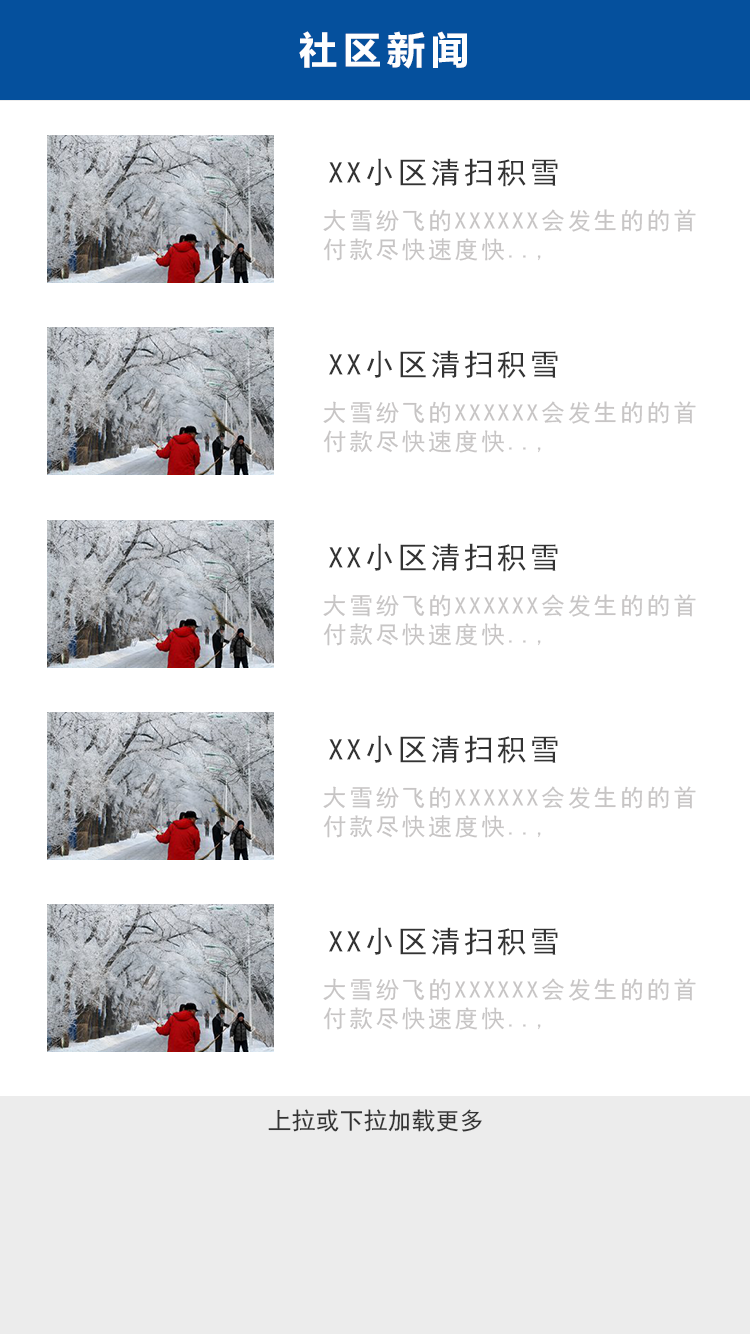
<style>
.page{position:relative;width:750px;height:1334px;background:#ffffff}
.page>*{position:absolute;margin:0}
.t1{font:40px "FZLTCHJW--GB1-0";letter-spacing:0.1em;color:#fefefe;text-transform:uppercase}
.t2{font:30px "SimHei";letter-spacing:0.1em;color:#333333;text-transform:uppercase}
.t3{font:24px/29.2px "SimHei";letter-spacing:0.1em;color:#c7c5c5;text-transform:uppercase}
.t4{font:24px "SimHei";color:#333333;text-transform:uppercase}
</style>
<div class="page">
<p class="t1" style="left:299px;top:31px;width:168px;height:38px">社区新闻</p>
<p class="t2" style="left:329px;top:158px;width:229px;height:29px">XX小区清扫积雪</p>
<p class="t3" style="left:323px;top:209px;width:373px;height:52px">大雪纷飞的XXXXXX会发生的的首<br>付款尽快速度快..,</p>
<p class="t2" style="left:329px;top:350px;width:229px;height:29px">XX小区清扫积雪</p>
<p class="t3" style="left:323px;top:401px;width:373px;height:52px">大雪纷飞的XXXXXX会发生的的首<br>付款尽快速度快..,</p>
<p class="t2" style="left:329px;top:543px;width:229px;height:29px">XX小区清扫积雪</p>
<p class="t3" style="left:323px;top:594px;width:373px;height:52px">大雪纷飞的XXXXXX会发生的的首<br>付款尽快速度快..,</p>
<p class="t2" style="left:329px;top:735px;width:229px;height:29px">XX小区清扫积雪</p>
<p class="t3" style="left:323px;top:786px;width:373px;height:52px">大雪纷飞的XXXXXX会发生的的首<br>付款尽快速度快..,</p>
<p class="t2" style="left:329px;top:927px;width:229px;height:29px">XX小区清扫积雪</p>
<p class="t3" style="left:323px;top:978px;width:373px;height:52px">大雪纷飞的XXXXXX会发生的的首<br>付款尽快速度快..,</p>
<p class="t4" style="left:268px;top:1109px;width:214px;height:23px">上拉或下拉加载更多</p>
</div>
